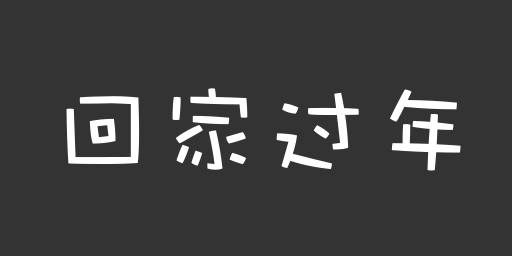
<style>
.page{position:relative;width:512px;height:256px;background:#333333}
.page>*{position:absolute;margin:0}
.t1{font:103px "DFWaWaSC-W5";letter-spacing:0.05em;color:#ffffff}
</style>
<div class="page">
<p class="t1" style="left:66px;top:88px;width:395px;height:83px">回家过年</p>
</div>
